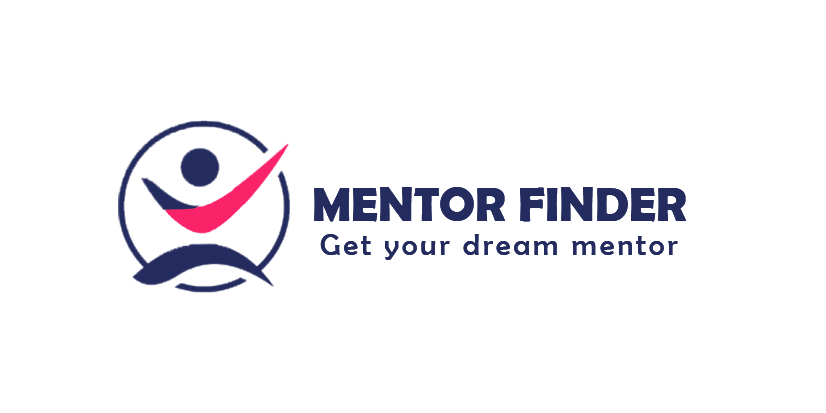
<style>
.page{position:relative;width:826px;height:413px;background:#ffffff}
.page>*{position:absolute;margin:0}
.t1{font:48px "BerlinSansFBDemi-Bold";color:#242b5e}
.t2{font:30px "BerlinSansFB-Reg";letter-spacing:0.1em;color:#242b5e}
</style>
<div class="page">
<p class="t1" style="left:314px;top:187px;width:373px;height:35px">MENTOR FINDER</p>
<p class="t2" style="left:320px;top:234px;width:358px;height:26px">Get your dream mentor</p>
</div>
